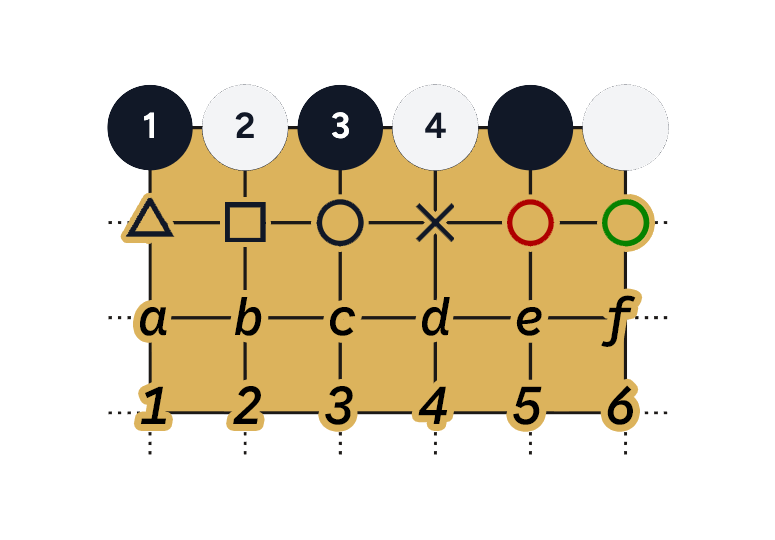
<style>
.page{position:relative;width:775px;height:540px;background:#ffffff}
.page>*{position:absolute;margin:0}
.t1{font:52px "GoogleSansCodeProportional-MediumItalic";color:#000000}
</style>
<div class="page">
<p class="t1" style="left:140px;top:295px;width:496px;height:52px">a    b    c    d    e    f</p>
<p class="t1" style="left:140px;top:385px;width:493px;height:40px">1    2    3    4    5    6</p>
</div>
